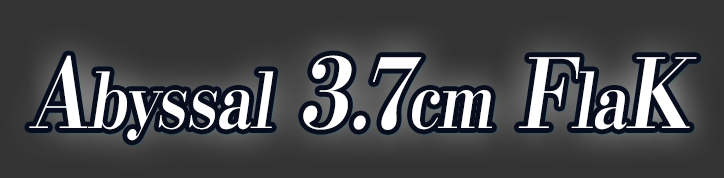
<style>
.page{position:relative;width:724px;height:178px;background:#333333}
.page>*{position:absolute;margin:0}
.t1{font:76.8px "KochoStd-Heavy";letter-spacing:-0.01em;color:#ffffff;font-style:italic;scale:0.83 1}
.t2{font:96px "KochoStd-Heavy";letter-spacing:-0.01em;color:#ffffff;font-style:italic;scale:0.83 1}
</style>
<div class="page">
<p class="t1" style="left:29px;top:55px;width:668px;height:86px"><span class="t2">A</span>byssal<span class="t2"> 3.7</span>cm<span class="t2"> F</span>la<span class="t2">K</span></p>
</div>
